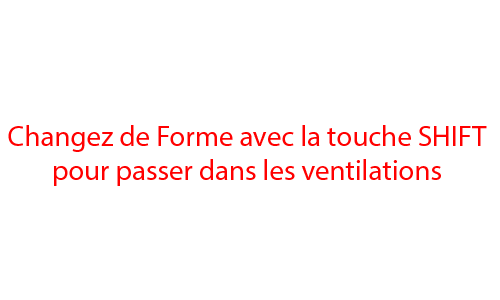
<style>
.page{position:relative;width:500px;height:300px;background:#ffffff}
.page>*{position:absolute;margin:0}
.t1{font:28.9px "MyriadPro-Regular";color:#ff0000}
</style>
<div class="page">
<p class="t1" style="left:8px;top:125px;width:479px;height:61px;text-align:center">Changez de Forme avec la touche SHIFT <br>pour passer dans les ventilations</p>
</div>
